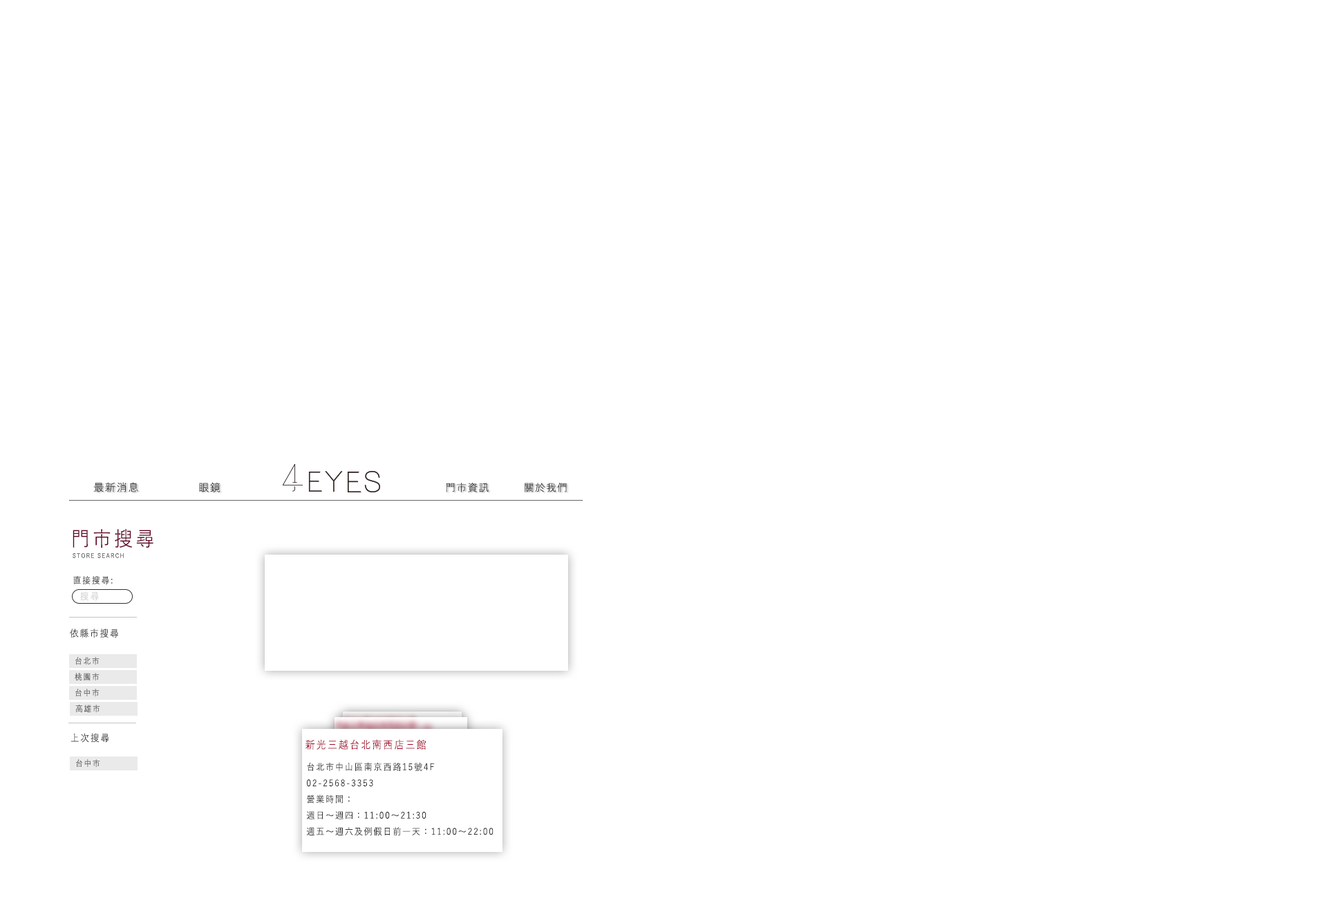
<style>
.page{position:relative;width:1327px;height:899px;background:#ffffff}
.page>*{position:absolute;margin:0}
.t1{font:10.7px "YuGothic-Regular";letter-spacing:0.08em;color:#353535}
.t2{font:10.7px "YuGothic-Regular";letter-spacing:0.08em;color:#343434}
.t3{font:10.3px "YuGothic-Regular";letter-spacing:0.08em;color:#353535}
.t4{font:10.3px "YuGothic-Regular";letter-spacing:0.08em;color:#333333}
.t5{font:20.7px "YuGothic-Regular";letter-spacing:0.14em;color:#610024;scale:0.91 1}
.t6{font:6.2px "YuGothic-Regular";letter-spacing:0.14em;color:#4d4d4d;scale:0.91 1}
.t7{font:9px "YuGothic-Regular";letter-spacing:0.14em;color:#313131;scale:0.92 1}
.t8{font:9.7px "YuGothic-Regular";letter-spacing:0.14em;color:#d0d0d0;scale:0.92 1}
.t9{font:9.7px "YuGothic-Regular";letter-spacing:0.14em;color:#313131;scale:0.91 1}
.t10{font:8.3px "YuGothic-Regular";letter-spacing:0.14em;color:#4a4a4a;scale:0.91 1}
.t11{font:8.3px "YuGothic-Regular";letter-spacing:0.14em;color:#585858;scale:0.91 1}
.t12{font:10.8px "YuGothic-Regular";letter-spacing:0.14em;color:#a20127;scale:0.91 1}
.t13{font:9.2px "YuGothic-Regular";letter-spacing:0.14em;color:#313131;scale:0.91 1}
</style>
<div class="page">
<p class="t1" style="left:93px;top:482px;width:45px;height:10px">最新消息</p>
<p class="t2" style="left:199px;top:482px;width:21px;height:10px">眼鏡</p>
<p class="t3" style="left:446px;top:482px;width:43px;height:10px">門市資訊</p>
<p class="t4" style="left:525px;top:482px;width:42px;height:10px">關於我們</p>
<p class="t5" style="left:73px;top:529px;width:80px;height:19px">門市搜尋</p>
<p class="t6" style="left:73px;top:552px;width:51px;height:6px">STORE SEARCH</p>
<p class="t7" style="left:73px;top:576px;width:40px;height:8px">直接搜尋:</p>
<p class="t8" style="left:80px;top:591px;width:19px;height:10px">搜尋</p>
<p class="t9" style="left:70px;top:628px;width:48px;height:9px">依縣市搜尋</p>
<p class="t10" style="left:75px;top:657px;width:25px;height:7px">台北市</p>
<p class="t10" style="left:75px;top:673px;width:25px;height:8px">桃園市</p>
<p class="t11" style="left:75px;top:688px;width:25px;height:8px">台中市</p>
<p class="t11" style="left:75px;top:704px;width:25px;height:9px">高雄市</p>
<p class="t9" style="left:71px;top:733px;width:38px;height:9px">上次搜尋</p>
<p class="t12" style="left:306px;top:739px;width:120px;height:10px">新光三越台北南西店三館</p>
<p class="t11" style="left:76px;top:759px;width:24px;height:8px">台中市</p>
<p class="t13" style="left:306px;top:762px;width:188px;height:74px">台北市中山區南京西路15號4F<br>02-2568-3353<br>營業時間：<br>週日～週四：11:00～21:30<br>週五～週六及例假日前一天：11:00～22:00</p>
</div>
